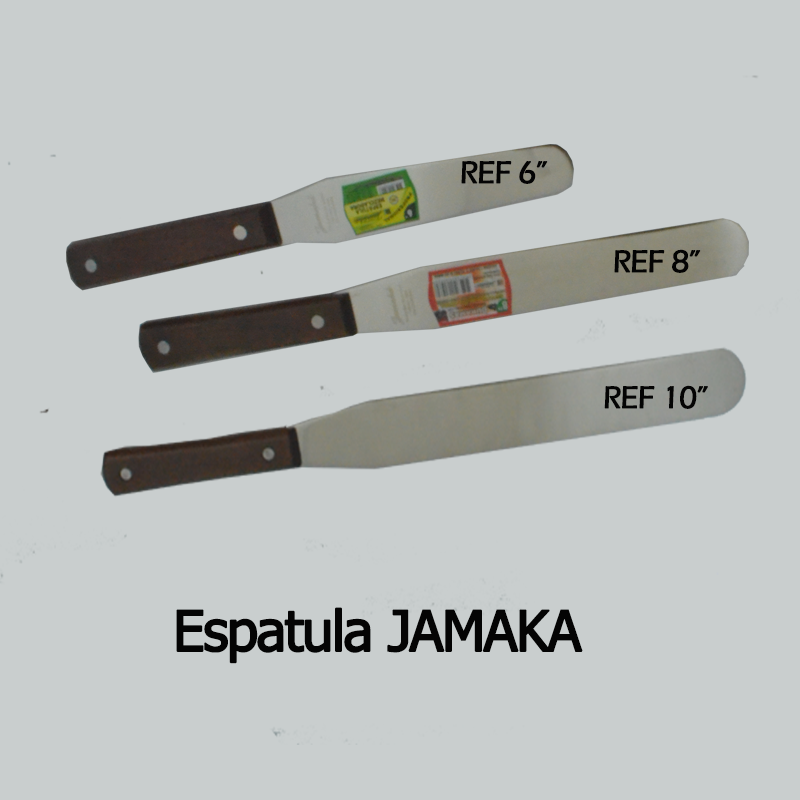
<style>
.page{position:relative;width:800px;height:800px;background:#c9cece}
.page>*{position:absolute;margin:0}
.t1{font:32px "ErasITC-Medium";letter-spacing:-0.05em;color:#040404;font-weight:bold}
.t2{font:56px "Tahoma";letter-spacing:-0.05em;color:#040404;font-weight:bold}
</style>
<div class="page">
<p class="t1" style="left:461px;top:161px;width:87px;height:23px">REF 6”</p>
<p class="t1" style="left:614px;top:249px;width:87px;height:24px">REF 8”</p>
<p class="t1" style="left:604px;top:385px;width:104px;height:24px">REF 10”</p>
<p class="t2" style="left:176px;top:607px;width:407px;height:57px">Espatula JAMAKA</p>
</div>
